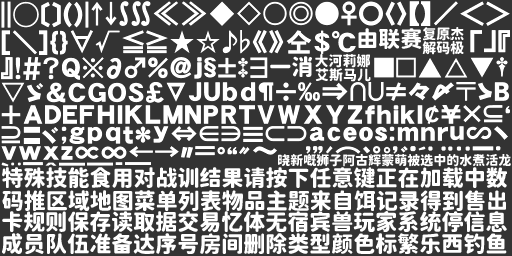
<style>
.page{position:relative;width:512px;height:256px;background:#333333}
.page>*{position:absolute;margin:0}
.t1{font:22px "JiangChengYuanTi-700W";color:#ffffff}
.t2{font:14px "JiangChengYuanTi-700W";color:#ffffff}
.t3{font:13px "JiangChengYuanTi-700W";color:#ffffff}
.t4{font:21.9px "JiangChengYuanTi-700W";color:#ffffff}
</style>
<div class="page">
<p class="t1" style="left:358px;top:28px;width:64px;height:21px">由联赛</p>
<p class="t2" style="left:423px;top:27px;width:41px;height:14px">复原杰</p>
<p class="t2" style="left:422px;top:41px;width:42px;height:14px">解码极</p>
<p class="t2" style="left:315px;top:54px;width:55px;height:14px">大河莉娜</p>
<p class="t1" style="left:270px;top:56px;width:42px;height:21px">一消</p>
<p class="t2" style="left:315px;top:68px;width:56px;height:14px">艾斯马儿</p>
<p class="t3" style="left:278px;top:154px;width:233px;height:13px">晓新嘅狮子阿古辉蒙萌被选中的水煮活龙</p>
<p class="t4" style="left:2px;top:167px;width:505px;height:22px">特殊技能食用对战训结果请按下任意键正在加载中数</p>
<p class="t4" style="left:2px;top:190px;width:504px;height:22px">码推区域地图菜单列表物品主题来自饵记录得到售出</p>
<p class="t4" style="left:2px;top:211px;width:505px;height:22px">卡规则保存读取据交易忆体无宿宾兽玩家系统停信息</p>
<p class="t4" style="left:2px;top:233px;width:505px;height:21px">成员队伍准备达序号房间删除类型颜色标繁乐西钓鱼</p>
</div>
